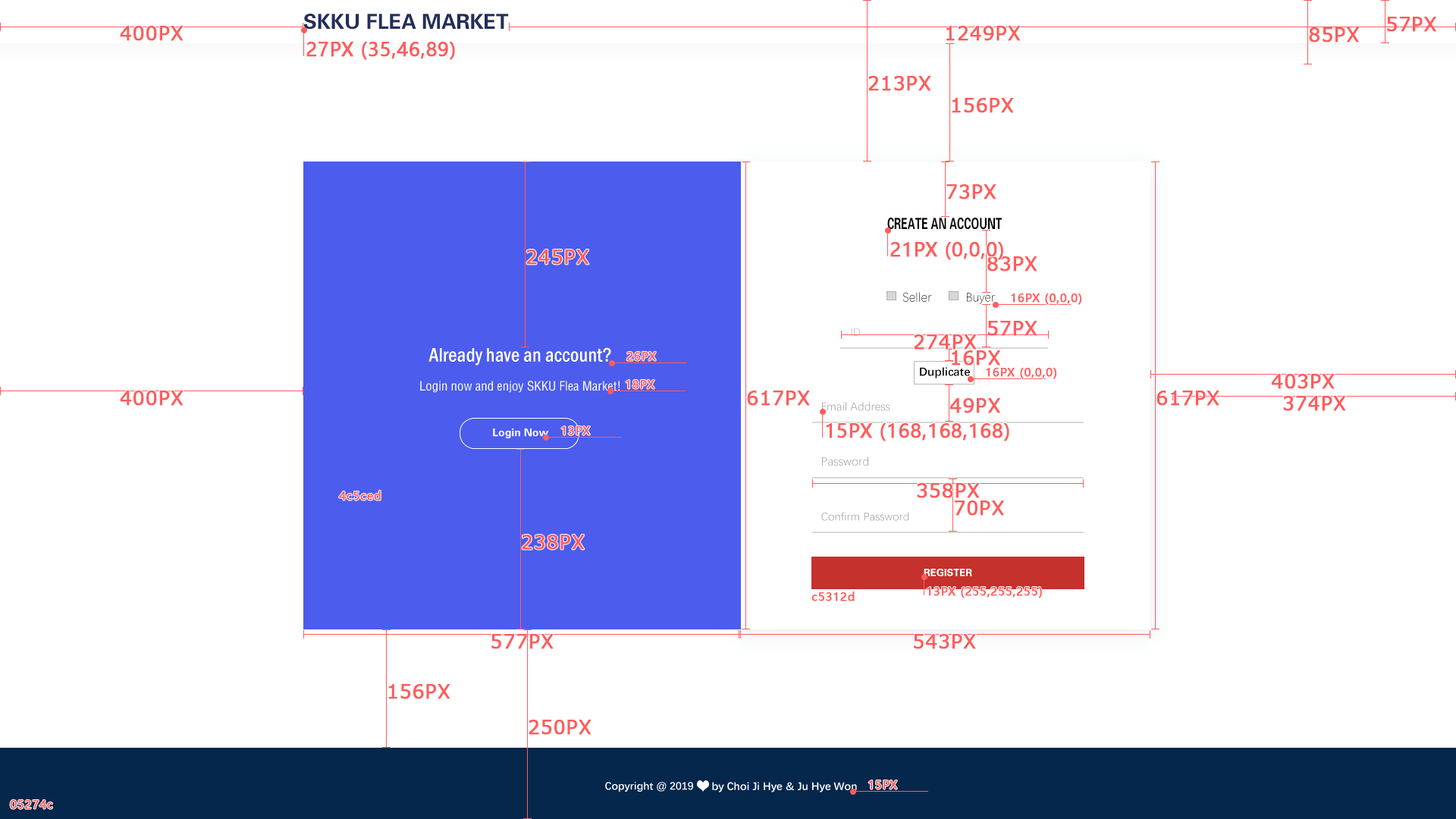
<style>
.page{position:relative;width:1456px;height:819px;background:#ffffff}
.page>*{position:absolute;margin:0}
.t1{font:20.6px "FZDHTJW--GB1-0";color:#232e59}
.t2{font:19px "Verdana";color:#ff5c5c;font-weight:bold}
.t3{font:19px "MicrosoftYaHei";color:#ff5c5c;font-weight:bold}
.t4{font:15.6px "FZDHTJW--GB1-0";color:#000000;scale:0.67 1}
.t5{font:13px "DengXian-Light"}
.t6{font:12.3px "DengXian-Light";color:#000000}
.t7{font:11.4px "MicrosoftYaHei";color:#ff5c5c;font-weight:bold}
.t8{font:11.1px "DengXian-Light";color:#a8a8a8}
.t9{font:11.9px "DengXian-Bold";color:#000000}
.t10{font:11.7px "DengXian";color:#a8a8a8}
.t11{font:12px "DengXian";color:#a8a8a8}
.t12{font:11.4px "DengXian";color:#a8a8a8}
.t13{font:9.9px "FZDHTJW--GB1-0";color:#ffffff}
</style>
<div class="page">
<p class="t1" style="left:303px;top:14px;width:206px;height:16px">SKKU FLEA MARKET</p>
<p class="t2" style="left:1387px;top:17px;width:49px;height:15px">57PX</p>
<p class="t2" style="left:120px;top:26px;width:64px;height:15px">400PX</p>
<p class="t2" style="left:946px;top:26px;width:75px;height:15px">1249PX</p>
<p class="t2" style="left:1309px;top:27px;width:50px;height:15px">85PX</p>
<p class="t3" style="left:306px;top:42px;width:149px;height:18px">27PX (35,46,89)</p>
<p class="t2" style="left:868px;top:76px;width:63px;height:15px">213PX</p>
<p class="t2" style="left:952px;top:98px;width:62px;height:15px">156PX</p>
<p class="t2" style="left:946px;top:184px;width:50px;height:15px">73PX</p>
<p class="t4" style="left:887px;top:217px;width:115px;height:13px">CREATE AN ACCOUNT</p>
<p class="t3" style="left:890px;top:242px;width:113px;height:18px">21PX (0,0,0)</p>
<p class="t2" style="left:526px;top:249px;width:63px;height:16px">245PX</p>
<p class="t2" style="left:987px;top:256px;width:50px;height:15px">83PX</p>
<p class="t5" style="left:903px;top:292px;width:29px;height:10px">Seller</p>
<p class="t6" style="left:967px;top:293px;width:28px;height:11px">Buyer</p>
<p class="t7" style="left:1011px;top:293px;width:71px;height:12px">16PX (0,0,0)</p>
<p class="t8" style="left:851px;top:328px;width:9px;height:8px">ID</p>
<p class="t2" style="left:987px;top:321px;width:50px;height:15px">57PX</p>
<p class="t2" style="left:914px;top:334px;width:63px;height:16px">274PX</p>
<p class="t7" style="left:626px;top:352px;width:30px;height:9px">26PX</p>
<p class="t2" style="left:952px;top:350px;width:48px;height:16px">16PX</p>
<p class="t9" style="left:920px;top:367px;width:50px;height:11px">Duplicate</p>
<p class="t7" style="left:986px;top:368px;width:71px;height:11px">16PX (0,0,0)</p>
<p class="t2" style="left:1272px;top:374px;width:63px;height:15px">403PX</p>
<p class="t7" style="left:626px;top:380px;width:28px;height:9px">18PX</p>
<p class="t2" style="left:120px;top:391px;width:64px;height:15px">400PX</p>
<p class="t2" style="left:747px;top:391px;width:63px;height:15px">617PX</p>
<p class="t10" style="left:822px;top:402px;width:68px;height:9px">Email Address</p>
<p class="t2" style="left:950px;top:398px;width:50px;height:15px">49PX</p>
<p class="t2" style="left:1156px;top:391px;width:63px;height:15px">617PX</p>
<p class="t2" style="left:1283px;top:396px;width:63px;height:15px">374PX</p>
<p class="t3" style="left:826px;top:423px;width:183px;height:18px">15PX (168,168,168)</p>
<p class="t7" style="left:561px;top:426px;width:29px;height:9px">13PX</p>
<p class="t11" style="left:822px;top:457px;width:46px;height:9px">Password</p>
<p class="t2" style="left:917px;top:483px;width:63px;height:15px">358PX</p>
<p class="t7" style="left:339px;top:491px;width:42px;height:9px">4c5ced</p>
<p class="t2" style="left:954px;top:500px;width:50px;height:16px">70PX</p>
<p class="t12" style="left:821px;top:512px;width:88px;height:9px">Confirm Password</p>
<p class="t2" style="left:522px;top:535px;width:63px;height:15px">238PX</p>
<p class="t13" style="left:924px;top:569px;width:48px;height:7px">REGISTER</p>
<p class="t7" style="left:811px;top:591px;width:44px;height:10px">c5312d</p>
<p class="t7" style="left:927px;top:587px;width:115px;height:11px">13PX (255,255,255)</p>
<p class="t2" style="left:491px;top:634px;width:63px;height:15px">577PX</p>
<p class="t2" style="left:914px;top:634px;width:62px;height:15px">543PX</p>
<p class="t2" style="left:389px;top:684px;width:61px;height:15px">156PX</p>
<p class="t2" style="left:529px;top:720px;width:62px;height:15px">250PX</p>
<p class="t7" style="left:868px;top:780px;width:29px;height:9px">15PX</p>
<p class="t7" style="left:10px;top:800px;width:43px;height:9px">05274c</p>
</div>
